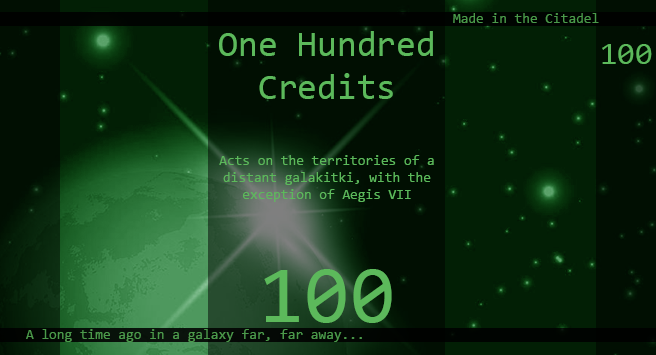
<style>
.page{position:relative;width:656px;height:355px;background:#010f02}
.page>*{position:absolute;margin:0}
.t1{font:14px "Consolas";color:#4a994a}
.t2{font:36px "Consolas";color:#5cb95b}
.t3{font:32px "Consolas";color:#5cb95b}
.t4{font:14px "Consolas";color:#5cb95b}
.t5{font:82px "Consolas";color:#5cb95b}
.t6{font:14px "Consolas";color:#4b994b}
</style>
<div class="page">
<p class="t1" style="left:453px;top:13px;width:146px;height:10px">Made in the Citadel</p>
<p class="t2" style="left:219px;top:31px;width:214px;height:68px;text-align:center">One Hundred<br>Credits</p>
<p class="t3" style="left:602px;top:44px;width:50px;height:20px">100</p>
<p class="t4" style="left:219px;top:155px;width:215px;height:47px;text-align:center">Acts on the territories of a distant galakitki, with the exception of Aegis VII</p>
<p class="t5" style="left:264px;top:269px;width:128px;height:54px">100</p>
<p class="t6" style="left:26px;top:329px;width:336px;height:13px">A long time ago in a galaxy far, far away...</p>
</div>
